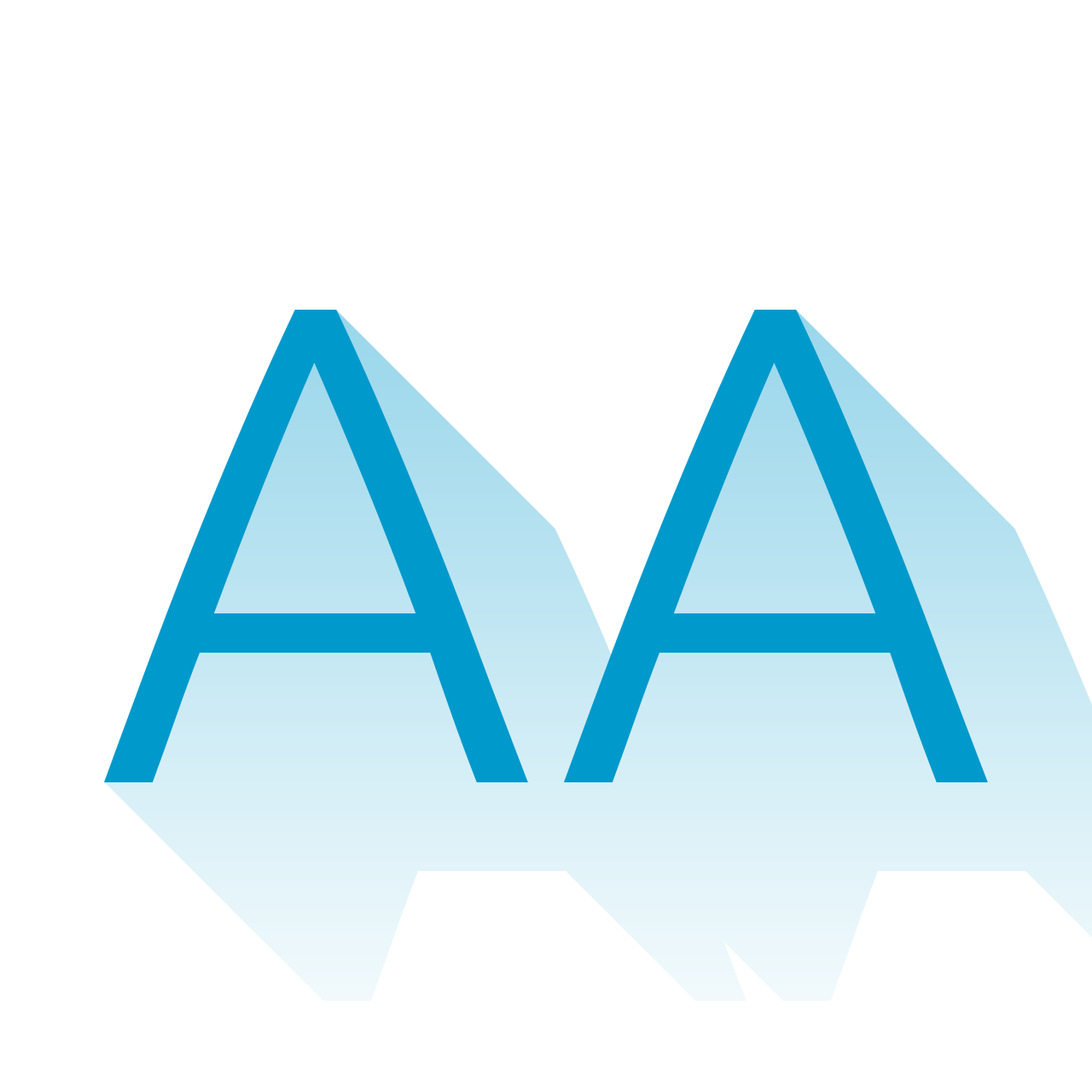
<style>
.page{position:relative;width:1092px;height:1092px;background:#ffffff}
.page>*{position:absolute;margin:0}
.t1{font:682.5px "Ubuntu-Light";color:#0099cc}
</style>
<div class="page">
<p class="t1" style="left:104px;top:310px;width:884px;height:472px">AA</p>
</div>
